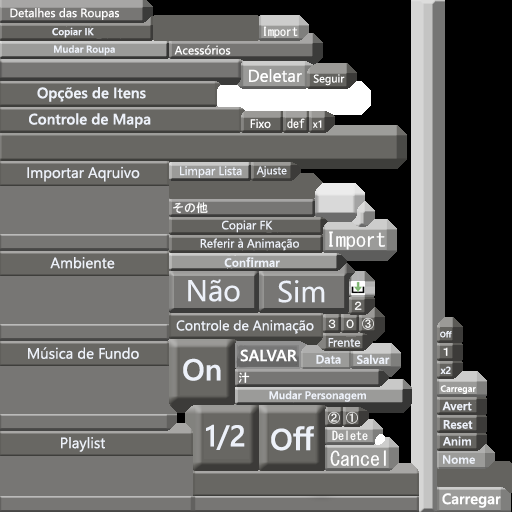
<style>
.page{position:relative;width:512px;height:512px;background:#777674}
.page>*{position:absolute;margin:0}
.t1{font:12px "YuGothicUI-Regular";color:#ffffff}
.t2{font:10px "YuGothicUI-Semibold";color:#edf1f9}
.t3{font:17px "YuGothicUI-Regular";color:#ffffff}
.t4{font:11px "YuGothicUI-Regular";color:#ffffff}
.t5{font:15px "YuGothicUI-Semibold";color:#edf1f9}
.t6{font:10px "YuGothicUI-Regular";color:#ffffff}
.t7{font:15px "YuGothicUI-Regular";color:#edf1f9}
.t8{font:12px "YuGothicUI-Regular";color:#edf1f9}
.t9{font:11px "YuGothicUI-Regular";color:#edf1f9}
.t10{font:12px "YuGothicUI-Semibold";color:#edf1f9}
.t11{font:30px "YuGothicUI-Regular";color:#edf1f9}
.t12{font:14px "YuGothicUI-Regular";color:#edf1f9}
.t13{font:8px "YuGothicUI-Bold";color:#edf1f9}
.t14{font:16px "YuGothicUI-Semibold";color:#ffffff}
.t15{font:30px "YuGothicUI-Bold";color:#edf1f9}
.t16{font:10px "YuGothicUI-Bold";color:#edf1f9}
.t17{font:11px "YuGothicUI-Semibold";color:#edf1f9}
.t18{font:9px "YuGothicUI-Semibold";color:#ffffff}
.t19{font:12px "YuGothicUI-Bold";color:#edf1f9}
.t20{font:15px "YuGothicUI-Semibold";color:#ffffff}
</style>
<div class="page">
<p class="t1" style="left:10px;top:8px;width:109px;height:12px">Detalhes das Roupas</p>
<p class="t2" style="left:52px;top:27px;width:42px;height:11px">Copiar IK</p>
<p class="t2" style="left:54px;top:45px;width:61px;height:11px">Mudar Roupa</p>
<p class="t1" style="left:174px;top:45px;width:57px;height:10px">Acessórios</p>
<p class="t3" style="left:249px;top:69px;width:53px;height:13px">Deletar</p>
<p class="t4" style="left:313px;top:74px;width:32px;height:12px">Seguir</p>
<p class="t5" style="left:37px;top:87px;width:109px;height:15px">Opções de Itens</p>
<p class="t5" style="left:29px;top:113px;width:122px;height:15px">Controle de Mapa</p>
<p class="t1" style="left:250px;top:119px;width:21px;height:10px">Fixo</p>
<p class="t6" style="left:313px;top:120px;width:9px;height:8px">x1</p>
<p class="t7" style="left:27px;top:166px;width:113px;height:16px">Importar Aqruivo</p>
<p class="t8" style="left:180px;top:166px;width:62px;height:12px">Limpar Lista</p>
<p class="t9" style="left:256px;top:166px;width:31px;height:11px">Ajuste</p>
<p class="t8" style="left:222px;top:220px;width:51px;height:13px">Copiar FK</p>
<p class="t8" style="left:200px;top:238px;width:99px;height:13px">Referir à Animação</p>
<p class="t7" style="left:50px;top:257px;width:65px;height:12px">Ambiente</p>
<p class="t10" style="left:224px;top:257px;width:56px;height:10px">Confirmar</p>
<p class="t11" style="left:188px;top:279px;width:52px;height:23px">Não</p>
<p class="t11" style="left:278px;top:280px;width:47px;height:23px">Sim</p>
<p class="t12" style="left:176px;top:320px;width:138px;height:14px">Controle de Animação</p>
<p class="t8" style="left:328px;top:338px;width:33px;height:9px">Frente</p>
<p class="t13" style="left:440px;top:331px;width:12px;height:7px">Off</p>
<p class="t7" style="left:28px;top:347px;width:111px;height:12px">Música de Fundo</p>
<p class="t14" style="left:240px;top:349px;width:57px;height:13px">SALVAR</p>
<p class="t15" style="left:183px;top:358px;width:38px;height:23px">On</p>
<p class="t10" style="left:316px;top:355px;width:25px;height:9px">Data</p>
<p class="t10" style="left:357px;top:354px;width:33px;height:10px">Salvar</p>
<p class="t16" style="left:440px;top:366px;width:11px;height:8px">x2</p>
<p class="t17" style="left:269px;top:390px;width:97px;height:12px">Mudar Personagem</p>
<p class="t18" style="left:440px;top:385px;width:36px;height:9px">Carregar</p>
<p class="t19" style="left:442px;top:401px;width:30px;height:10px">Avert</p>
<p class="t15" style="left:206px;top:424px;width:39px;height:26px">1/2</p>
<p class="t19" style="left:443px;top:420px;width:30px;height:9px">Reset</p>
<p class="t7" style="left:61px;top:437px;width:44px;height:15px">Playlist</p>
<p class="t15" style="left:271px;top:426px;width:43px;height:25px">Off</p>
<p class="t19" style="left:443px;top:436px;width:28px;height:10px">Anim</p>
<p class="t19" style="left:443px;top:455px;width:32px;height:9px">Nome</p>
<p class="t20" style="left:442px;top:493px;width:59px;height:15px">Carregar</p>
</div>
